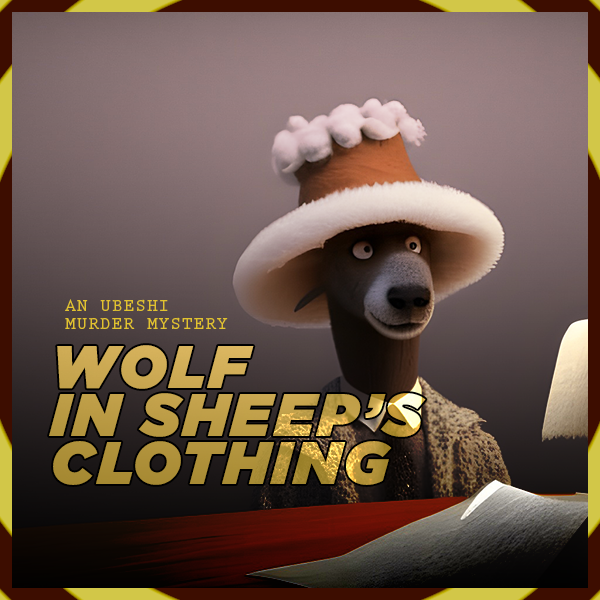
<style>
.page{position:relative;width:600px;height:600px}
.page>*{position:absolute;margin:0}
.t1{font:12px "MyriadPro-Regular";color:#e1c22f}
.t2{font:12px "MyriadPro-Regular";color:#bd9c45}
</style>
<div class="page">
<p class="t1" style="left:65px;top:299px;width:163px;height:30px">AN UBESHI <br>MURDER MYSTERY</p>
<p class="t2" style="left:49px;top:345px;width:377px;height:140px">WOLF<br>IN SHEEP’S<br>CLOTHING</p>
</div>
